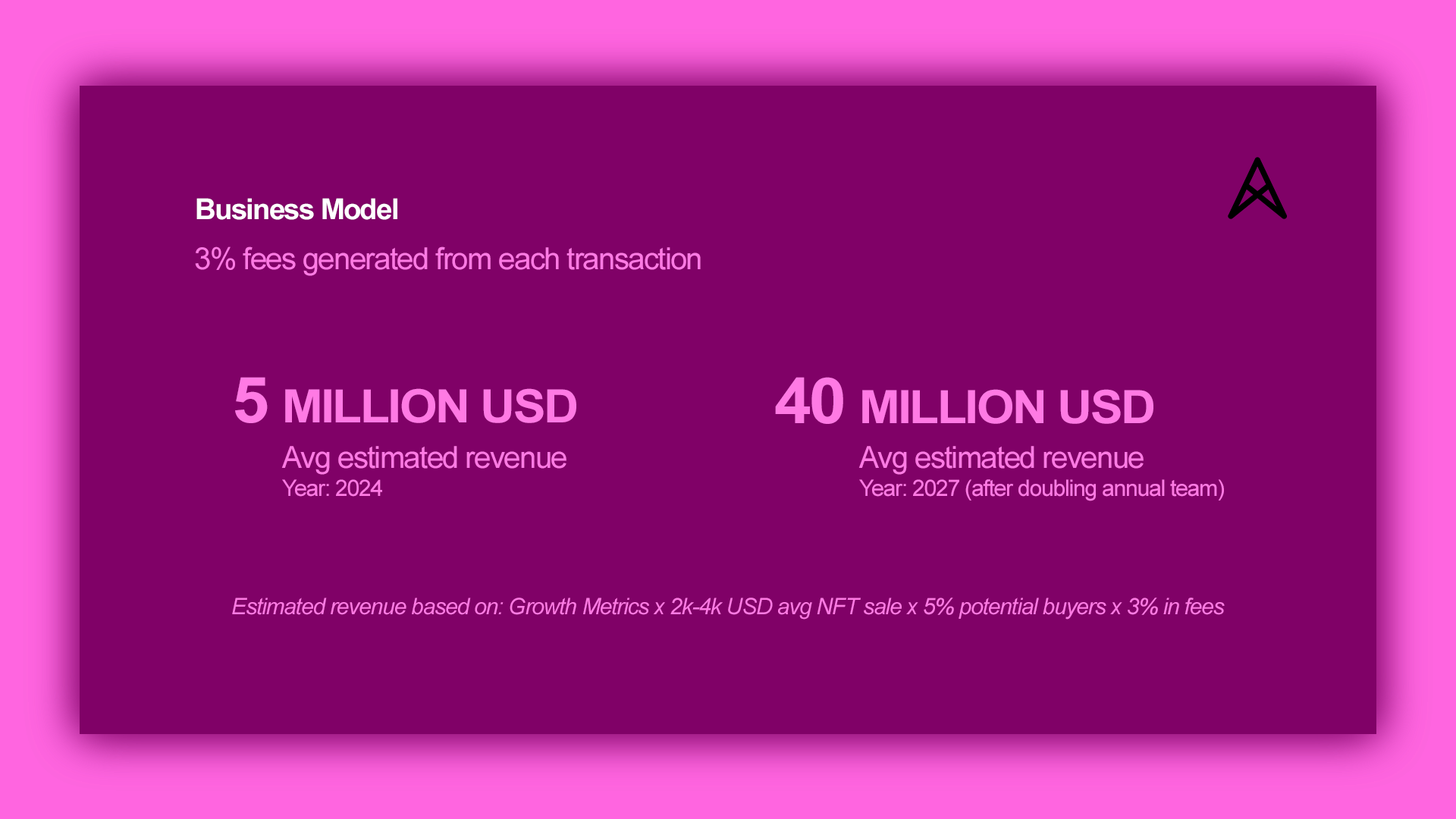
<style>
.page{position:relative;width:1456px;height:819px;background:#800167}
.page>*{position:absolute;margin:0}
.t1{font:28.8px "Arial-BoldMT";letter-spacing:-0.04em;color:#feffff}
.t2{font:30.3px "ArialMT";letter-spacing:-0.04em;color:#ff7ae4}
.t3{font:46.2px "Arial-BoldMT";letter-spacing:-0.04em;color:#ff7ae4;scale:1.05 1}
.t4{font:63.5px "Arial-BoldMT";letter-spacing:-0.04em;color:#ff7ae4;scale:1.05 1}
.t5{font:22.7px "ArialMT";letter-spacing:-0.04em;color:#ff7ae4}
.t6{font:22.7px "Arial-ItalicMT";letter-spacing:-0.04em;color:#ff7ae4}
</style>
<div class="page">
<p class="t1" style="left:196px;top:198px;width:201px;height:22px">Business Model</p>
<p class="t2" style="left:195px;top:246px;width:506px;height:30px">3% fees generated from each transaction</p>
<p class="t3" style="left:235px;top:377px;width:341px;height:46px"><span class="t4">5 </span>MILLION USD</p>
<p class="t3" style="left:775px;top:377px;width:378px;height:47px"><span class="t4">40 </span>MILLION USD</p>
<p class="t2" style="left:281px;top:446px;width:285px;height:29px">Avg estimated revenue</p>
<p class="t2" style="left:858px;top:446px;width:286px;height:29px">Avg estimated revenue</p>
<p class="t5" style="left:282px;top:479px;width:100px;height:18px">Year: 2024</p>
<p class="t5" style="left:859px;top:479px;width:365px;height:22px">Year: 2027 (after doubling annual team)</p>
<p class="t6" style="left:232px;top:598px;width:993px;height:22px">Estimated revenue based on: Growth Metrics x 2k-4k USD avg NFT sale x 5% potential buyers x 3% in fees</p>
</div>
